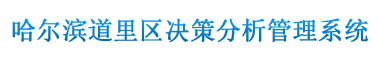
<style>
.page{position:relative;width:380px;height:61px;background:#ffffff}
.page>*{position:absolute;margin:0}
.t1{font:24.9px "SimSun";color:#0580cd;font-weight:bold}
</style>
<div class="page">
<p class="t1" style="left:12px;top:18px;width:356px;height:25px">哈尔滨道里区决策分析管理系统</p>
</div>
